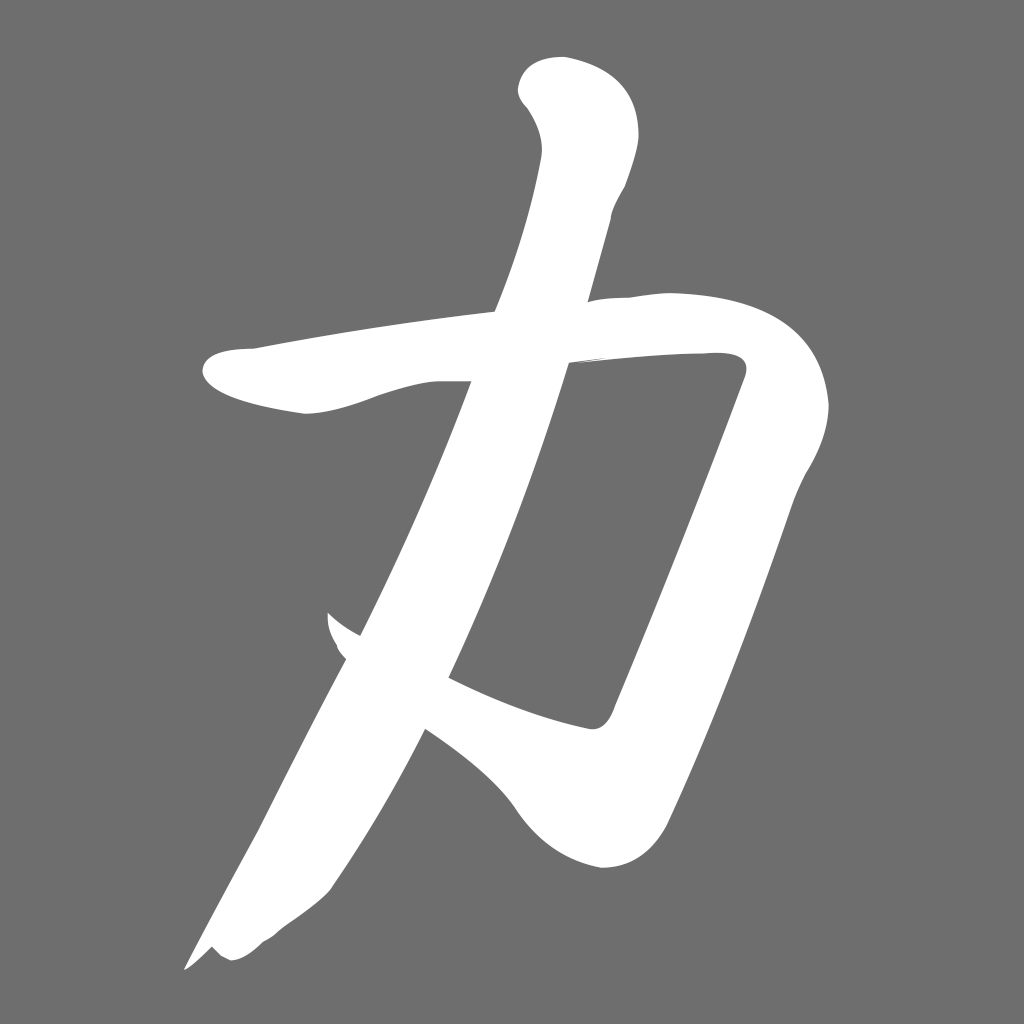
<style>
.page{position:relative;width:1024px;height:1024px;background:#6e6e6e}
.page>*{position:absolute;margin:0}
.t1{font:1186.2px "FZQTJW--GB1-0";letter-spacing:0.05em;color:#ffffff}
</style>
<div class="page">
<p class="t1" style="left:184px;top:56px;width:645px;height:914px">力</p>
</div>
